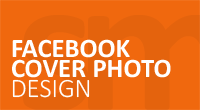
<style>
.page{position:relative;width:200px;height:110px;background:#f0680e}
.page>*{position:absolute;margin:0}
.t1{font:26.6px/20.8px "Calibri-Bold";color:#ffffff}
.t2{font:26.6px "Calibri-Light";color:#ffffff}
</style>
<div class="page">
<p class="t1" style="left:12px;top:39px;width:159px;height:39px">FACEBOOK<br>COVER PHOTO</p>
<p class="t2" style="left:12px;top:79px;width:78px;height:19px">DESIGN</p>
</div>
